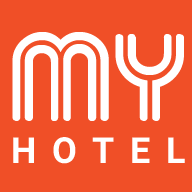
<style>
.page{position:relative;width:192px;height:192px;background:#f04f27}
.page>*{position:absolute;margin:0}
.t1{font:140px "Quangtri";color:#ffffff}
.t2{font:36px "Roboto-Bold";letter-spacing:0.43em;color:#ffffff}
</style>
<div class="page">
<p class="t1" style="left:12px;top:32px;width:172px;height:89px">MY</p>
<p class="t2" style="left:13px;top:137px;width:172px;height:27px">HOTEL</p>
</div>
